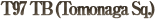
<style>
.page{position:relative;width:156px;height:19px;background:#ffffff}
.page>*{position:absolute;margin:0}
.t1{font:18px "RyuminPro-ExBold";letter-spacing:-0.12em;color:#4a3f32;font-weight:bold;scale:0.9 1}
</style>
<div class="page">
<p class="t1" style="left:0px;top:1px;width:155px;height:18px">T97 TB (Tomonaga Sq.)</p>
</div>
